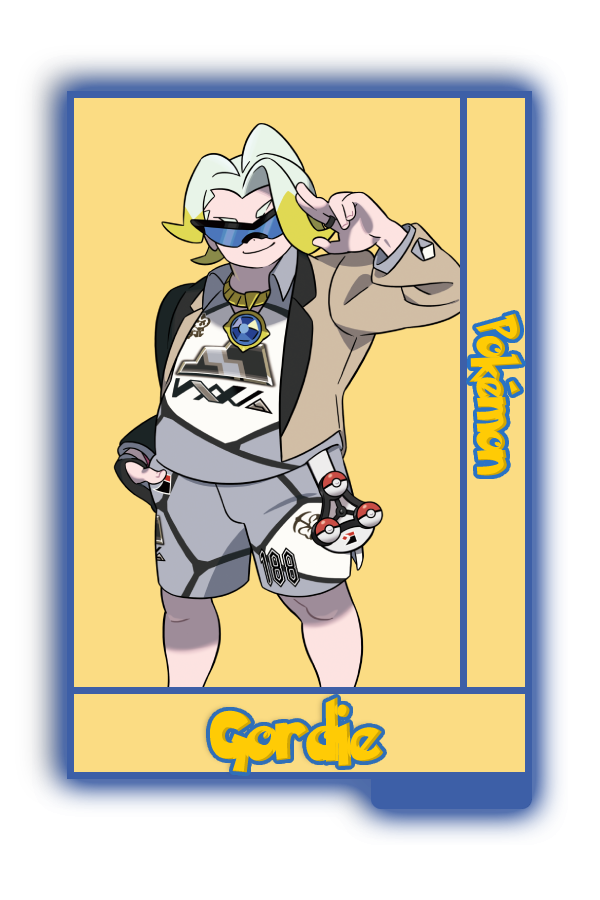
<style>
.page{position:relative;width:600px;height:900px;background:#fbdc83}
.page>*{position:absolute;margin:0}
.t1{font:48.8px "PokemonSolidNormal";color:#ffcb05;scale:0.8 1}
.t2{font:60.1px "PokemonSolidNormal";color:#ffcb05;scale:0.96 1}
</style>
<div class="page">
<p class="t1" style="left:469px;top:313px;width:54px;height:163px;rotate:90deg">Pokémon</p>
<p class="t2" style="left:209px;top:697px;width:175px;height:76px">Gordie</p>
</div>
